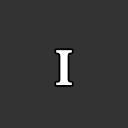
<style>
.page{position:relative;width:128px;height:128px;background:#333333}
.page>*{position:absolute;margin:0}
.t1{font:50px "Georgia-Bold";letter-spacing:-0.05em;color:#ffffff;scale:0.8 1}
</style>
<div class="page">
<p class="t1" style="left:56px;top:50px;width:16px;height:35px">I</p>
</div>
